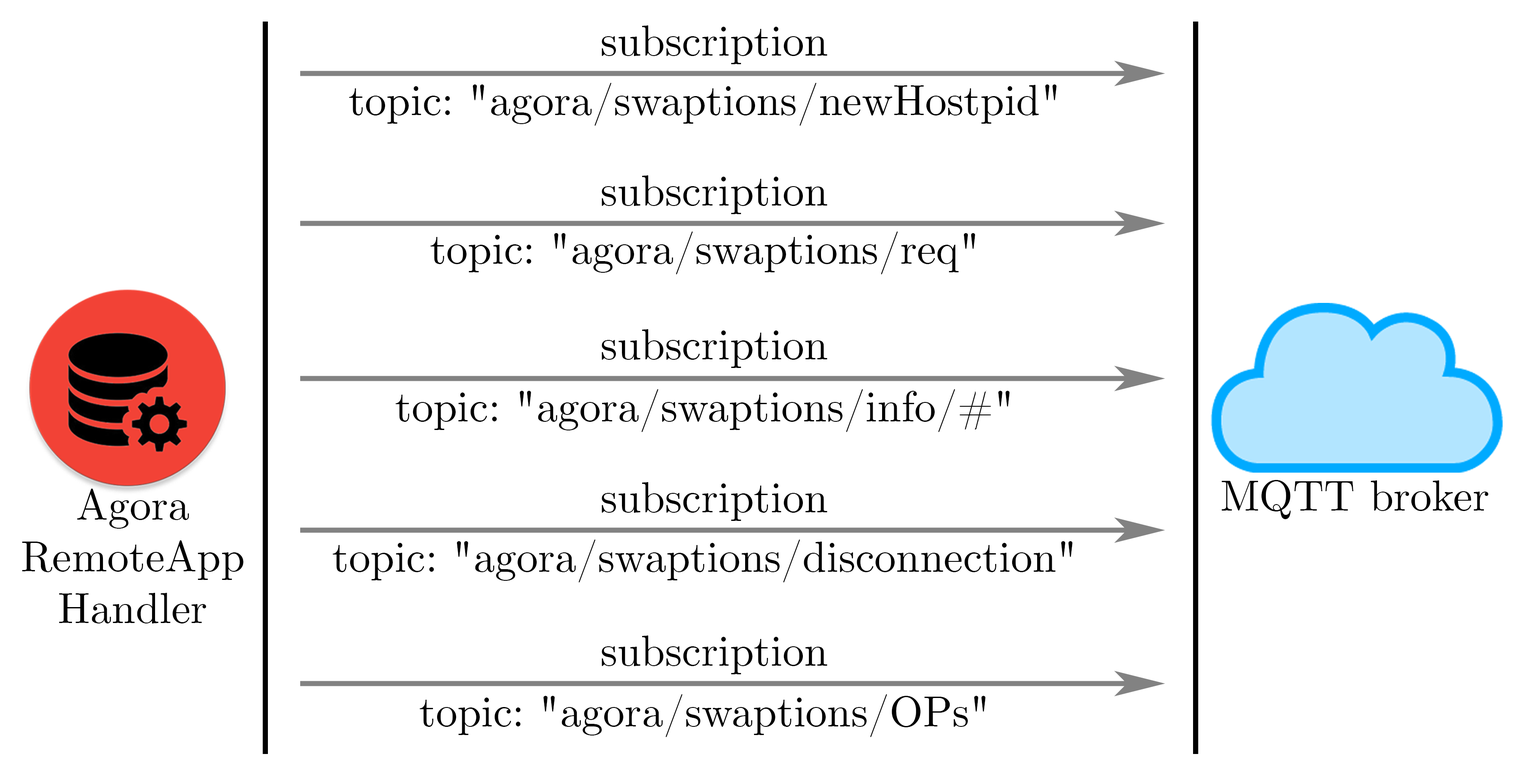
<style>
.page{position:relative;width:1526px;height:782px;background:#ffffff}
.page>*{position:absolute;margin:0}
.t1{font:43.1px "CMUSerif-Roman";color:#000000}
</style>
<div class="page">
<p class="t1" style="left:602px;top:25px;width:225px;height:39px">subscription</p>
<p class="t1" style="left:349px;top:83px;width:707px;height:43px">topic: "agora/swaptions/newHostpid"</p>
<p class="t1" style="left:602px;top:175px;width:225px;height:39px">subscription</p>
<p class="t1" style="left:430px;top:231px;width:545px;height:43px">topic: "agora/swaptions/req"</p>
<p class="t1" style="left:602px;top:329px;width:225px;height:39px">subscription</p>
<p class="t1" style="left:395px;top:389px;width:614px;height:43px">topic: "agora/swaptions/info/#"</p>
<p class="t1" style="left:602px;top:482px;width:225px;height:39px">subscription</p>
<p class="t1" style="left:1221px;top:480px;width:267px;height:39px">MQTT broker</p>
<p class="t1" style="left:22px;top:488px;width:221px;height:135px;text-align:center">Agora<br>RemoteApp<br>Handler</p>
<p class="t1" style="left:332px;top:539px;width:740px;height:43px">topic: "agora/swaptions/disconnection"</p>
<p class="t1" style="left:602px;top:635px;width:225px;height:39px">subscription</p>
<p class="t1" style="left:419px;top:694px;width:566px;height:43px">topic: "agora/swaptions/OPs"</p>
</div>
